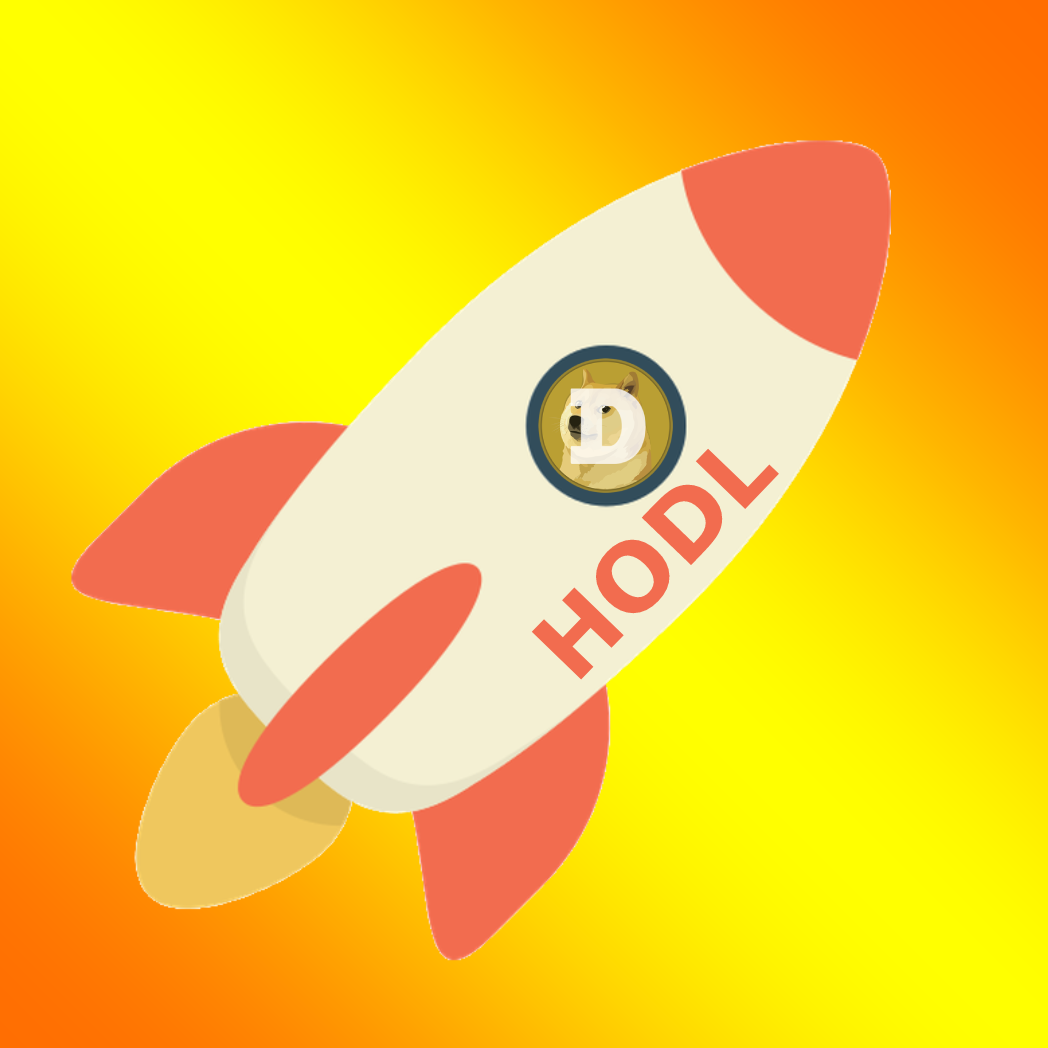
<style>
.page{position:relative;width:1048px;height:1048px}
.page>*{position:absolute;margin:0}
.t1{font:94px "DejaVuSans-Bold";color:#f26c4f}
</style>
<div class="page">
<p class="t1" style="left:531px;top:448px;width:248px;height:232px;rotate:-46deg">HODL</p>
</div>
